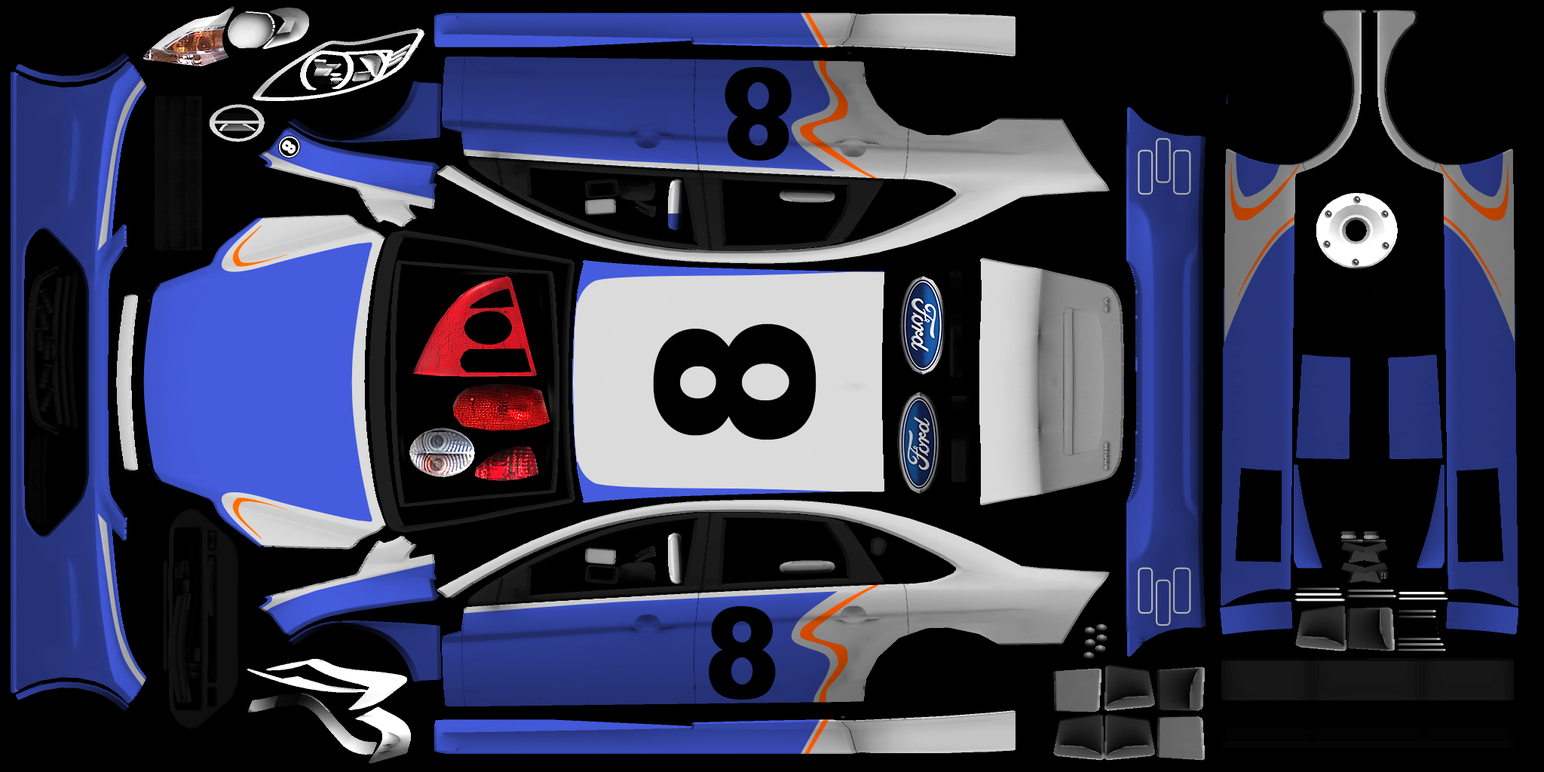
<style>
.page{position:relative;width:1544px;height:772px;background:#000000}
.page>*{position:absolute;margin:0}
.t1{font:125.6px "Arial-Black";letter-spacing:0.1em;color:#000000;scale:0.91 1}
.t2{font:18px "Arial-Black";letter-spacing:0.1em;color:#ffffff;font-weight:bold;scale:0.89 1}
.t3{font:6px "Swiss721BT-BlackExtended";scale:0.95 1}
.t4{font:219.6px "Arial-Black";letter-spacing:0.1em;color:#000000;scale:0.9 1}
</style>
<div class="page">
<p class="t1" style="left:725px;top:67px;width:67px;height:94px;rotate:180deg">8</p>
<p class="t2" style="left:282px;top:140px;width:14px;height:14px;rotate:125deg">8</p>
<p class="t3" style="left:1105px;top:298px;width:5px;height:14px;rotate:-90deg">2.0</p>
<p class="t4" style="left:653px;top:323px;width:164px;height:117px;rotate:-90deg">8</p>
<p class="t3" style="left:1105px;top:442px;width:5px;height:28px;rotate:-90deg">FOCUS</p>
<p class="t1" style="left:709px;top:606px;width:67px;height:94px">8</p>
</div>
